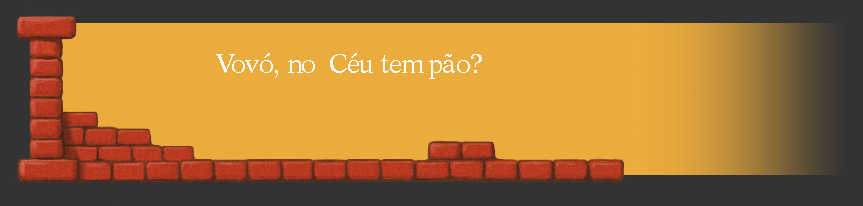
<style>
.page{position:relative;width:863px;height:206px;background:#ecac3d}
.page>*{position:absolute;margin:0}
.t1{font:26.5px "Dutch809BT-RomanC";color:#ffffff}
</style>
<div class="page">
<p class="t1" style="left:216px;top:53px;width:266px;height:26px">Vovó, no  Céu tem pão?</p>
</div>
